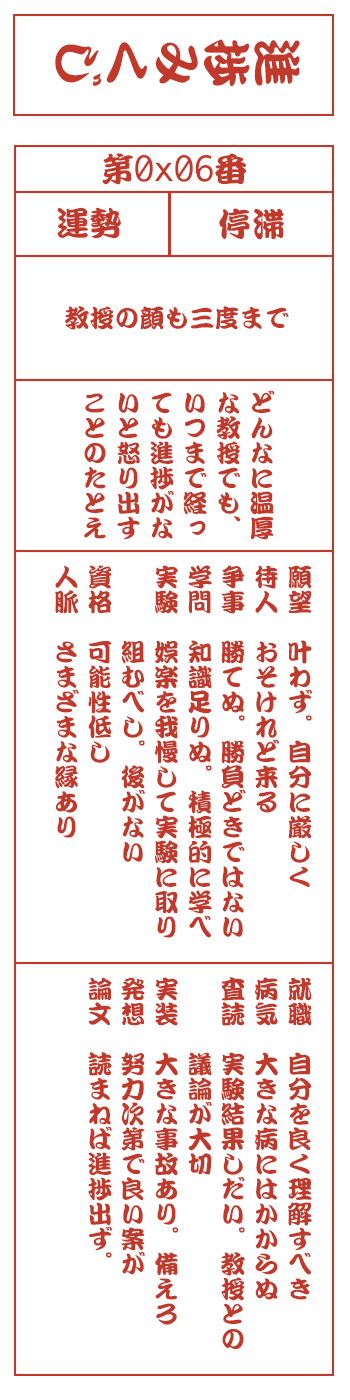
<style>
.page{position:relative;width:350px;height:1400px;background:#ffffff}
.page>*{position:absolute;margin:0}
.t1{font:50px "DFKanTeiRyu-XB-MP-RKSJ-H";color:#c0392b}
.t2{font:33.3px "Monaco";color:#c0392b}
.t3{font:33.3px "DFKanTeiRyu-XB-MP-RKSJ-H";color:#c0392b}
.t4{font:25px "DFKanTeiRyu-XB-MP-RKSJ-H";color:#c0392b}
.t5{font:25px/33.3px "DFKanTeiRyu-XB-MP-RKSJ-H";color:#c0392b}
</style>
<div class="page">
<p class="t1" style="left:55px;top:39px;width:245px;height:47px;rotate:90deg">進捗みくじ</p>
<p class="t2" style="left:102px;top:153px;width:144px;height:32px"><span class="t3">第</span>0x06<span class="t3">番</span></p>
<p class="t3" style="left:57px;top:207px;width:64px;height:31px">運勢</p>
<p class="t3" style="left:219px;top:208px;width:65px;height:32px">停滞</p>
<p class="t4" style="left:65px;top:306px;width:224px;height:24px">教授の顔も三度まで</p>
<p class="t5" style="left:84px;top:390px;width:191px;height:150px">どんなに温厚<br>な教授でも、<br>いつまで経っ<br>ても進捗がな<br>いと怒り出す<br>ことのたとえ</p>
<p class="t5" style="left:55px;top:565px;width:257px;height:373px">願望　叶わず。自分に厳しく<br>待人　おそけれど来る<br>争事　勝てぬ。勝負どきではない<br>学問　知識足りぬ。積極的に学べ<br>実験　娯楽を我慢して実験に取り<br>　　　組むべし。後がない<br>資格　可能性低し<br>人脈　さまざまな縁あり</p>
<p class="t5" style="left:88px;top:977px;width:224px;height:372px">就職　自分を良く理解すべき<br>病気　大きな病にはかからぬ<br>査読　実験結果しだい。教授との<br>　　　議論が大切<br>実装　大きな事故あり。備えろ<br>発想　努力次第で良い案が<br>論文　読まねば進捗出ず。</p>
</div>
